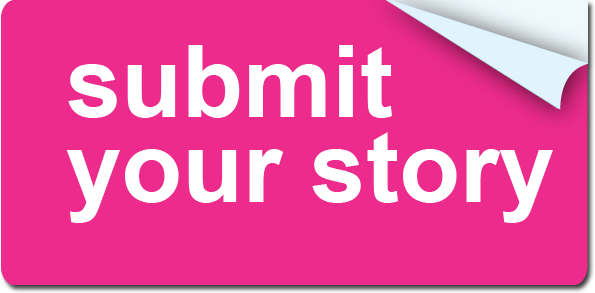
<style>
.page{position:relative;width:595px;height:293px;background:#ec2b8c}
.page>*{position:absolute;margin:0}
.t1{font:100px/85.4px "Arial-BoldMT";color:#ffffff}
</style>
<div class="page">
<p class="t1" style="left:66px;top:45px;width:487px;height:178px">submit <br>your story</p>
</div>
